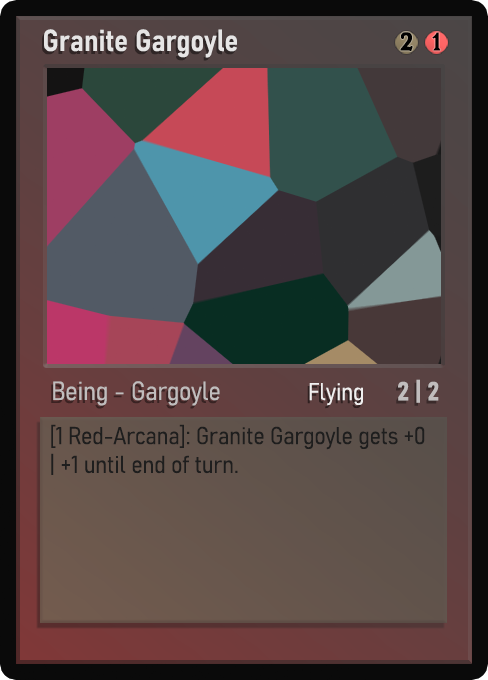
<style>
.page{position:relative;width:488px;height:680px}
.page>*{position:absolute;margin:0}
.t1{font:30px "Bahnschrift-SemiBoldSemiCondensed";color:#f2f2f2;font-weight:bold}
.t2{font:25px "WTRRoycroft";color:#000000;font-weight:bold;scale:1.09 1}
.t3{font:26px "Bahnschrift-LightSemiCondensed";color:#c8c8c8;font-weight:bold}
.t4{font:24px "Bahnschrift-LightSemiCondensed";color:#f0efef;font-weight:bold}
.t5{font:26px "Bahnschrift-BoldSemiCondensed";color:#c1bdbd;font-weight:bold}
.t6{font:24px "Bahnschrift-LightSemiCondensed";color:#1e1e1e;font-weight:bold}
</style>
<div class="page">
<p class="t1" style="left:44px;top:29px;width:193px;height:29px;opacity:0.9">Granite Gargoyle</p>
<p class="t2" style="left:400px;top:32px;width:13px;height:19px">2</p>
<p class="t2" style="left:432px;top:32px;width:9px;height:19px">1</p>
<p class="t3" style="left:53px;top:381px;width:167px;height:25px;opacity:0.9">Being - Gargoyle</p>
<p class="t4" style="left:309px;top:383px;width:54px;height:23px">Flying</p>
<p class="t5" style="left:398px;top:379px;width:41px;height:24px">2 | 2</p>
<p class="t6" style="left:51px;top:424px;width:374px;height:51px">[1 Red-Arcana]: Granite Gargoyle gets +0 | +1 until end of turn.</p>
</div>
